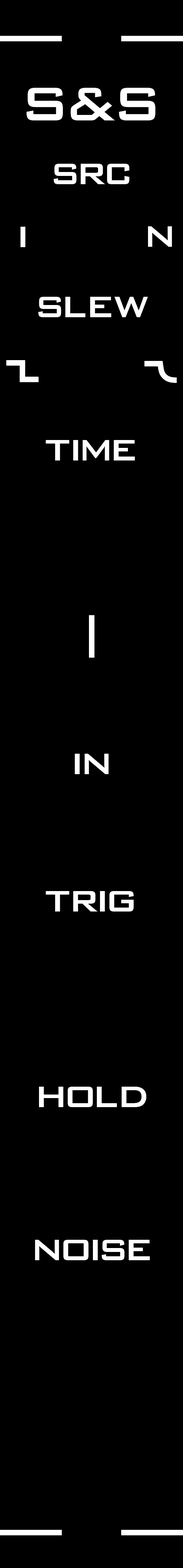
<style>
.page{position:relative;width:183px;height:1568px;background:#000000}
.page>*{position:absolute;margin:0}
.t1{font:63px "BankGothicBT-Medium";letter-spacing:-0.08em;color:#ffffff}
.t2{font:39.4px "BankGothicBT-Medium";letter-spacing:-0.14em;color:#ffffff}
.t3{font:39.4px "BankGothicBT-Medium";letter-spacing:-0.12em;color:#ffffff}
.t4{font:39.4px "BankGothicBT-Medium";letter-spacing:-0.06em;color:#ffffff}
.t5{font:39.4px "BankGothicBT-Medium";letter-spacing:-0.04em;color:#ffffff}
</style>
<div class="page">
<p class="t1" style="left:26px;top:88px;width:129px;height:32px">S&amp;S</p>
<p class="t2" style="left:54px;top:164px;width:75px;height:20px">S<span class="t3">R</span>C</p>
<p class="t4" style="left:20px;top:227px;width:6px;height:20px">I</p>
<p class="t2" style="left:148px;top:226px;width:24px;height:21px">N</p>
<p class="t2" style="left:38px;top:297px;width:110px;height:20px">S<span class="t4">L</span><span class="t5">E</span><span class="t4">W</span></p>
<p class="t2" style="left:46px;top:440px;width:89px;height:20px"><span class="t5">T</span>IME</p>
<p class="t2" style="left:75px;top:754px;width:34px;height:20px">I<span class="t5">N</span></p>
<p class="t5" style="left:46px;top:891px;width:88px;height:21px">T<span class="t3">R</span><span class="t2">I</span>G</p>
<p class="t2" style="left:39px;top:1087px;width:107px;height:20px">HO<span class="t4">L</span><span class="t5">D</span></p>
<p class="t2" style="left:35px;top:1240px;width:115px;height:20px">NOISE</p>
</div>
